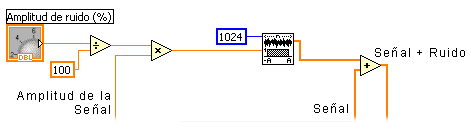
<style>
.page{position:relative;width:471px;height:130px;background:#ffffff}
.page>*{position:absolute;margin:0}
.t1{font:12px "ArialMT";letter-spacing:0.1em;color:#000000}
</style>
<div class="page">
<p class="t1" style="left:375px;top:47px;width:90px;height:10px">Señal + Ruido</p>
<p class="t1" style="left:17px;top:91px;width:93px;height:23px;text-align:right">Amplitud de la Señal</p>
<p class="t1" style="left:314px;top:103px;width:34px;height:10px">Señal</p>
</div>
